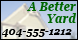
<style>
.page{position:relative;width:78px;height:40px}
.page>*{position:absolute;margin:0}
.t1{font:12px/12px "Georgia-BoldItalic";color:#006600;scale:0.94 1}
.t2{font:11px/12px "Georgia-BoldItalic";color:#000000;scale:0.94 1}
</style>
<div class="page">
<p class="t1" style="left:2px;top:2px;width:74px;height:35px;text-align:right">A Better<br>Yard<br><span class="t2">404-555-1212</span></p>
</div>
